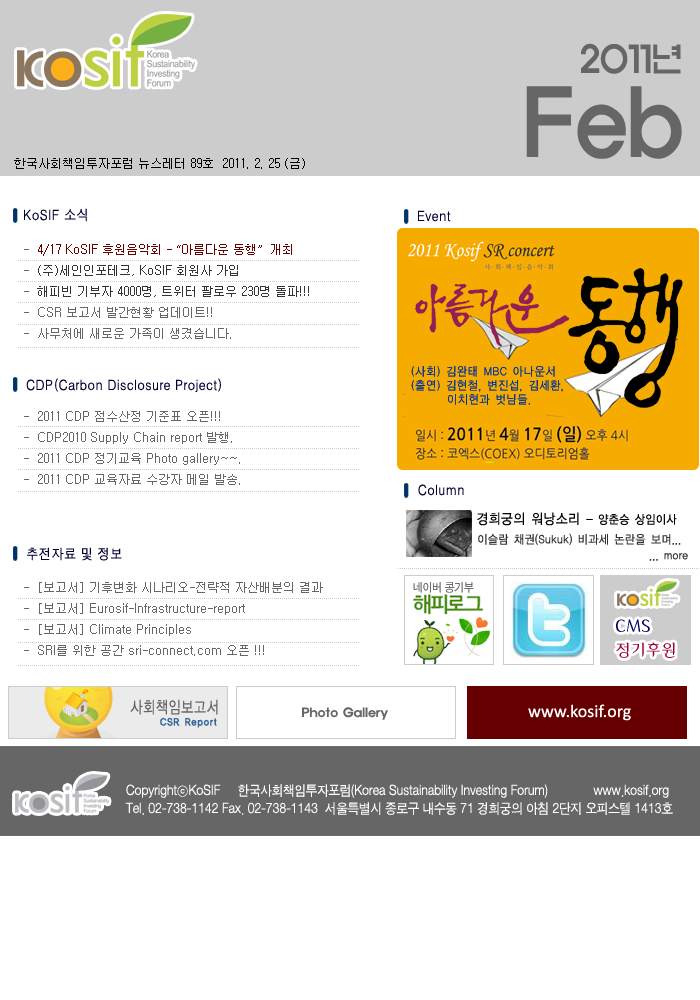
<style>
.page{position:relative;width:700px;height:1000px;background:#ffffff}
.page>*{position:absolute;margin:0}
.t1{font:36.1px/41.9px "ExpoM-HM";color:#666666;scale:0.89 1}
.t2{font:90.2px/41.9px "ExpoM-HM";color:#666666;scale:0.89 1}
.t3{font:12px "Gulim";color:#000000}
.t4{font:14px "H2gtrM";color:#000033;scale:0.9 1}
.t5{font:12px "Gulim";color:#666666}
.t6{font:12px "Gulim";color:#660000}
.t7{font:12px "Gulim";color:#333333}
.t8{font:12px/14px "YDIYGO120-KSCpc-EUC-H";color:#003399;scale:0.9 1}
.t9{font:12px "YDIYGO120-KSCpc-EUC-H";letter-spacing:-0.025em;color:#000000;scale:0.9 1}
.t10{font:14px "YDIYGO120-KSCpc-EUC-H";letter-spacing:-0.025em;color:#000000;scale:0.9 1}
.t11{font:12px "YDIYGO120-KSCpc-EUC-H";letter-spacing:-0.025em;color:#333333;scale:0.9 1}
.t12{font:17.1px/24px "Gaeul";color:#990033}
.t13{font:17.1px/24px "Gaeul";color:#000066}
.t14{font:12px "ExpoM-HM";color:#666666}
.t15{font:18px "Calibri";color:#ffffff}
.t16{font:14px/18px "SandJg";color:#ffffff;scale:0.9 1}
</style>
<div class="page">
<p class="t1" style="left:526px;top:43px;width:156px;height:116px;text-align:right">2011년<br><span class="t2">Feb</span></p>
<p class="t3" style="left:14px;top:158px;width:291px;height:11px">한국사회책임투자포럼 뉴스레터 89호  2011. 2. 25 (금)</p>
<p class="t4" style="left:24px;top:208px;width:63px;height:14px">KoSIF 소식</p>
<p class="t4" style="left:418px;top:210px;width:33px;height:12px">Event</p>
<p class="t5" style="left:24px;top:244px;width:285px;height:95px">-  <span class="t6">4/17 KoSIF 후원음악회 - “아름다운 동행”  개최<br></span>- <span class="t7"> (주)세인인포테크, KoSIF 회원사 가입 <br></span>-  <span class="t7">해피빈 기부자 4000명, 트위터 팔로우 230명 돌파!!!<br></span>-  CSR 보고서 발간현황 업데이트!! <br>-  사무처에 새로운 가족이 생겼습니다.</p>
<p class="t8" style="left:411px;top:366px;width:152px;height:39px">(사회) 김완태 MBC 아나운서<br>(출연) 김현철, 변진섭, 김세환, <br>       이치현과 벗님들.</p>
<p class="t4" style="left:26px;top:378px;width:195px;height:14px">CDP(Carbon Disclosure Project)</p>
<p class="t5" style="left:24px;top:411px;width:216px;height:74px">-  2011 CDP 점수산정 기준표 오픈!!! <br>-  CDP2010 Supply Chain report 발행. <br>-  2011 CDP 정기교육 Photo gallery~~.<br>-  2011 CDP 교육자료 수강자 메일 발송.</p>
<p class="t4" style="left:418px;top:484px;width:46px;height:12px">Column</p>
<p class="t9" style="left:477px;top:512px;width:200px;height:14px"><span class="t10">경희궁의 워낭소리 </span>- 양춘승 상임이사</p>
<p class="t11" style="left:478px;top:533px;width:203px;height:12px">이슬람 채권(Sukuk) 비과세 논란을 보며...</p>
<p class="t4" style="left:27px;top:547px;width:95px;height:14px">추전자료 및 정보</p>
<p class="t11" style="left:649px;top:553px;width:39px;height:8px">... more</p>
<p class="t5" style="left:24px;top:582px;width:299px;height:74px">-  [보고서] 기후변화 시나리오-전략적 자산배분의 결과 <br>-  [보고서] Eurosif-Infrastructure-report<br>-  [보고서] Climate Principles<br>-  SRI를 위한 공간 sri-connect.com 오픈 !!!</p>
<p class="t12" style="left:616px;top:619px;width:59px;height:39px"><span class="t13">CMS <br></span>정기후원</p>
<p class="t14" style="left:302px;top:707px;width:86px;height:13px">Photo Gallery</p>
<p class="t15" style="left:528px;top:704px;width:103px;height:17px">www.kosif.org</p>
<p class="t16" style="left:125px;top:784px;width:548px;height:31px">CopyrightⓒKoSIF     한국사회책임투자포럼(Korea Sustainability Investing Forum)             www.kosif.org <br>Tel. 02-738-1142 Fax. 02-738-1143  서울특별시 종로구 내수동 71 경희궁의 아침 2단지 오피스텔 1413호</p>
</div>
